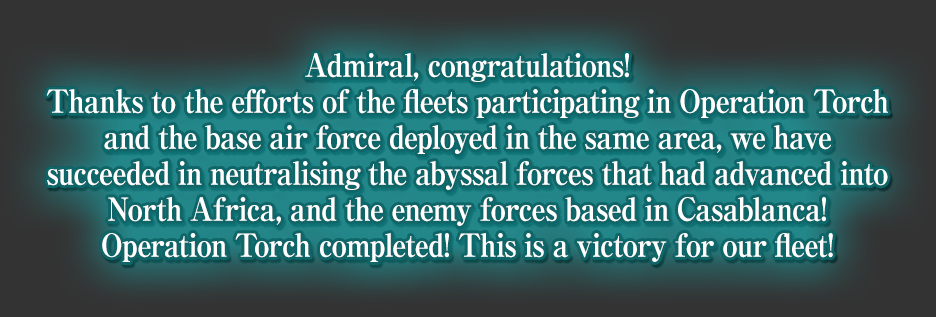
<style>
.page{position:relative;width:936px;height:317px}
.page>*{position:absolute;margin:0}
.t1{font:32px/36px "RyuminPro-ExBold";letter-spacing:-0.04em;color:#ffffff;scale:0.9 1}
</style>
<div class="page">
<p class="t1" style="left:46px;top:53px;width:842px;height:209px;text-align:center">Admiral, congratulations!<br>Thanks to the efforts of the fleets participating in Operation Torch<br>and the base air force deployed in the same area, we have<br>succeeded in neutralising the abyssal forces that had advanced into<br>North Africa, and the enemy forces based in Casablanca!<br>Operation Torch completed! This is a victory for our fleet!</p>
</div>
